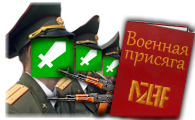
<style>
.page{position:relative;width:195px;height:120px;background:#ffffff}
.page>*{position:absolute;margin:0}
.t1{font:24px/14px "Gabriola";color:#d28200}
</style>
<div class="page">
<p class="t1" style="left:125px;top:31px;width:64px;height:39px;text-align:center;rotate:10deg">Военная<br>присяга</p>
</div>
